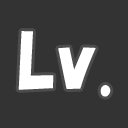
<style>
.page{position:relative;width:128px;height:128px;background:#333333}
.page>*{position:absolute;margin:0}
.t1{font:72px "HGPSoeiKakupoptai";letter-spacing:0.025em;color:#ffffff}
</style>
<div class="page">
<p class="t1" style="left:18px;top:31px;width:93px;height:66px">Lv.</p>
</div>
